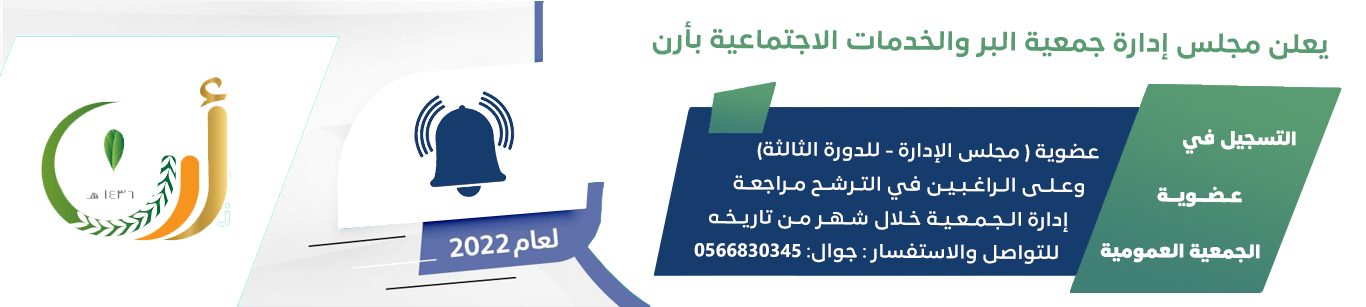
<style>
.page{position:relative;width:1366px;height:307px;background:#ffffff}
.page>*{position:absolute;margin:0}
.t1{font:25.8px "LoewNextArabic-ExtraBold";color:#599c71}
.t2{font:18.7px "LoewNextArabic-Black";color:#ffffff}
.t3{font:18.7px "LoewNextArabic-Bold";color:#ffffff}
.t4{font:18.7px "Ebrima-Bold";color:#ffffff}
</style>
<div class="page">
<p class="t1" style="left:652px;top:21px;width:677px;height:39px">يعلن مجلس إدارة جمعية البر والخدمات الاجتماعية بأرن</p>
<p class="t2" style="left:1183px;top:129px;width:113px;height:25px">التسجيل في</p>
<p class="t3" style="left:757px;top:139px;width:342px;height:24px">عضوية ( مجلس الإدارة - للدورة الثالثة)</p>
<p class="t3" style="left:733px;top:175px;width:351px;height:25px">وعـلـى الـراغـبـيـن في التـرشـح مـراجعـة</p>
<p class="t2" style="left:1157px;top:186px;width:85px;height:21px">عـضــويــة</p>
<p class="t3" style="left:709px;top:209px;width:359px;height:23px">إدارة الـجـمـعـيـة خـلال شـهـر مـن تاريـخـه</p>
<p class="t3" style="left:694px;top:243px;width:364px;height:21px">للتواصل والاستفسار : جوال: <span class="t4">0566830345</span></p>
<p class="t2" style="left:1100px;top:243px;width:160px;height:20px">الجمعية العمومية</p>
</div>
